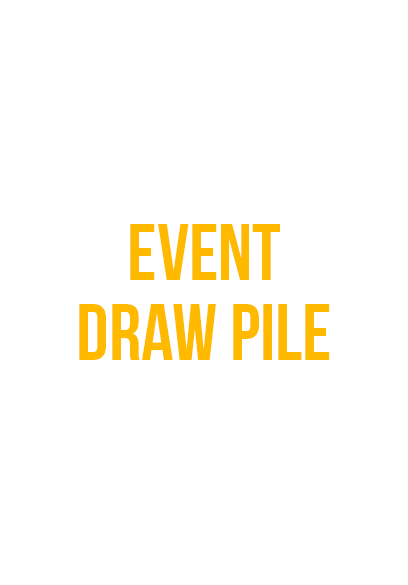
<style>
.page{position:relative;width:408px;height:585px;background:#ffffff}
.page>*{position:absolute;margin:0}
.t1{font:80px/80px "BebasNeue";color:#ffba00}
</style>
<div class="page">
<p class="t1" style="left:79px;top:224px;width:251px;height:136px;text-align:center">event<br>draw pile</p>
</div>
